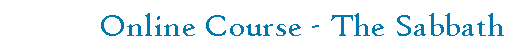
<style>
.page{position:relative;width:513px;height:50px;background:#ffffff}
.page>*{position:absolute;margin:0}
.t1{font:33.3px "HighTowerText-Reg";color:#0078ad}
</style>
<div class="page">
<p class="t1" style="left:101px;top:13px;width:403px;height:23px">Online Course - The Sabbath</p>
</div>
